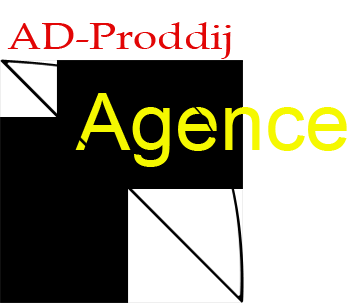
<style>
.page{position:relative;width:351px;height:303px;background:#ffffff}
.page>*{position:absolute;margin:0}
.t1{font:36.6px "BookAntiqua";color:#e20606;scale:1.19 1}
.t2{font:78.8px "ArialMT";color:#f5f800}
</style>
<div class="page">
<p class="t1" style="left:7px;top:22px;width:224px;height:37px">AD-Proddij</p>
<p class="t2" style="left:75px;top:93px;width:272px;height:74px">Agence</p>
</div>
